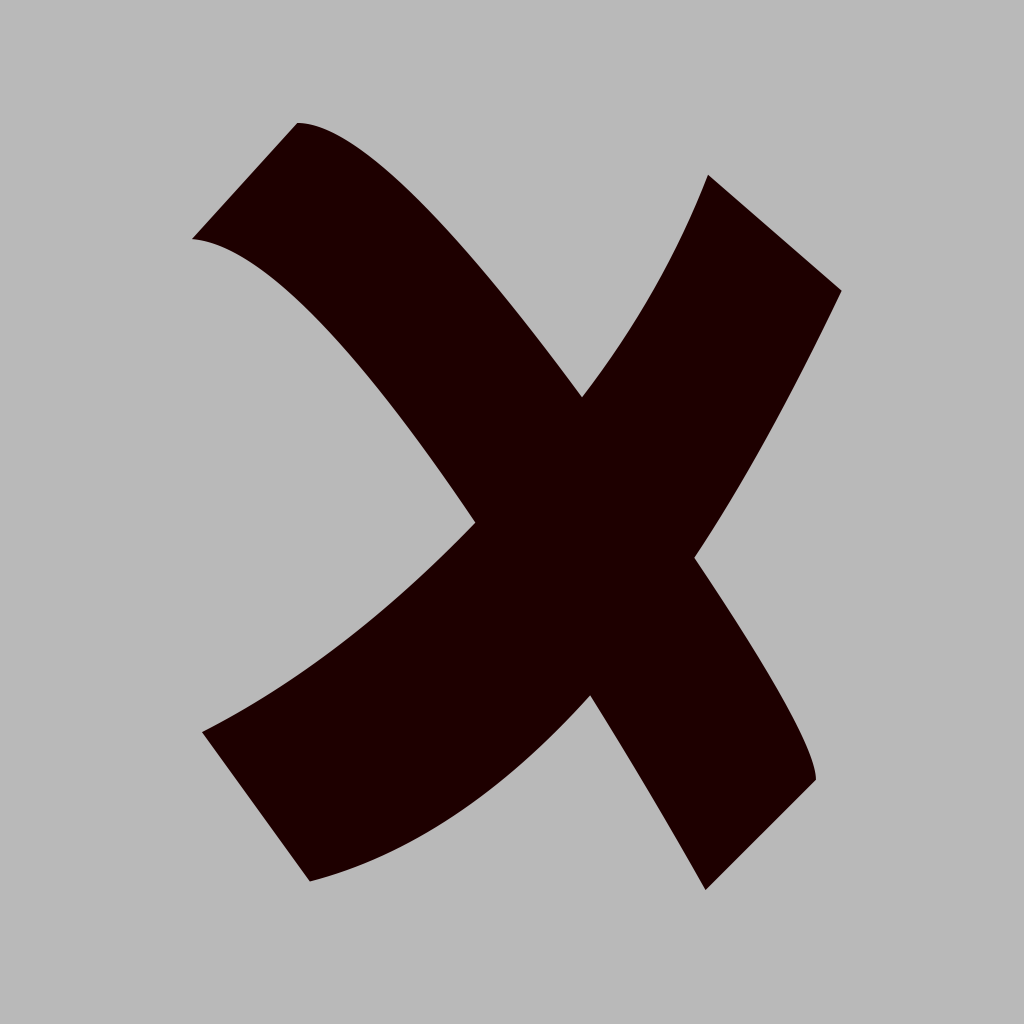
<style>
.page{position:relative;width:1024px;height:1024px;background:#b9b9b9}
.page>*{position:absolute;margin:0}
.t1{font:833.3px "ChinyenNormal";color:#1f0000}
</style>
<div class="page">
<p class="t1" style="left:192px;top:123px;width:650px;height:767px">X</p>
</div>
